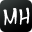
<style>
.page{position:relative;width:32px;height:32px}
.page>*{position:absolute;margin:0}
.t1{font:20px "MangaTemple";color:#ffffff;scale:0.88 1}
</style>
<div class="page">
<p class="t1" style="left:3px;top:7px;width:27px;height:19px">MH</p>
</div>
